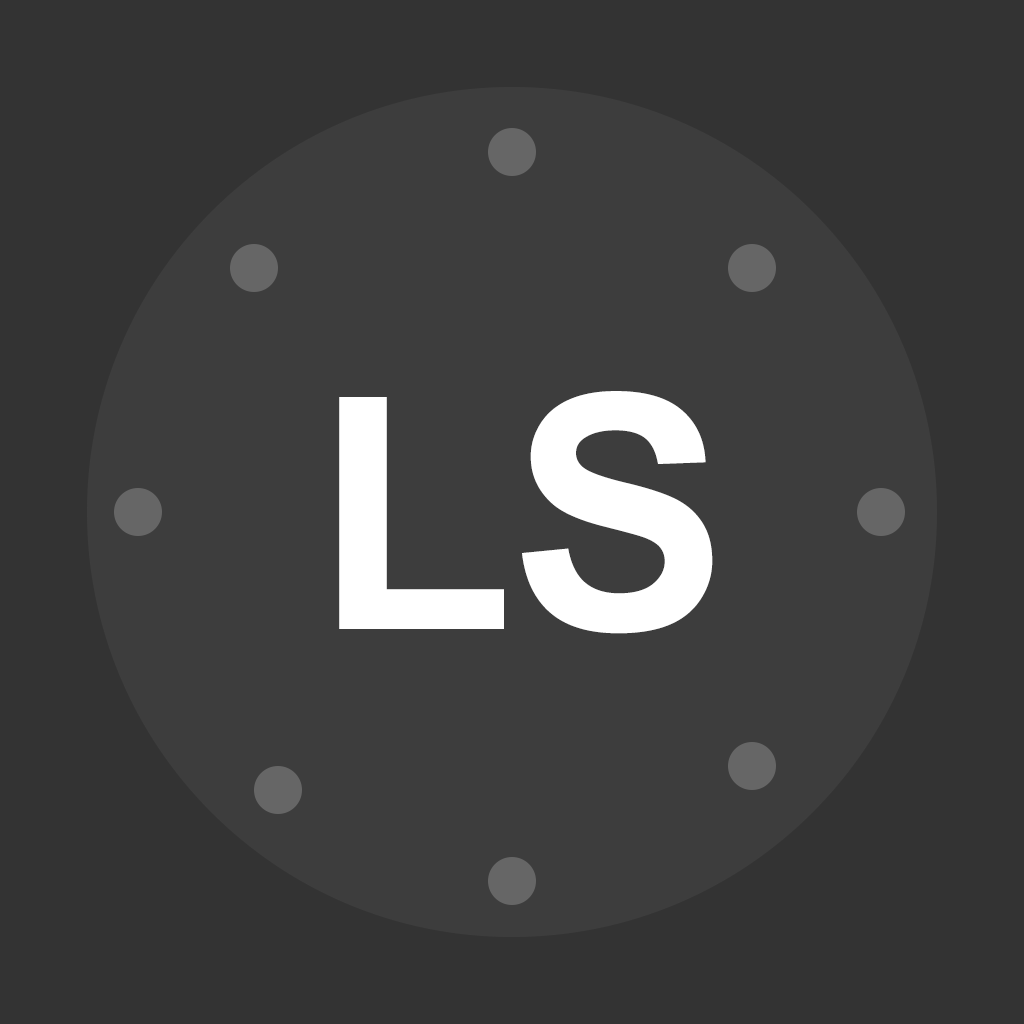
<style>
.page{position:relative;width:1024px;height:1024px;background:#3d3d3d}
.page>*{position:absolute;margin:0}
.t1{font:326.5px "Arial-BoldMT";letter-spacing:-0.01em;color:#ffffff}
</style>
<div class="page">
<p class="t1" style="left:339px;top:391px;width:374px;height:243px">LS</p>
</div>
